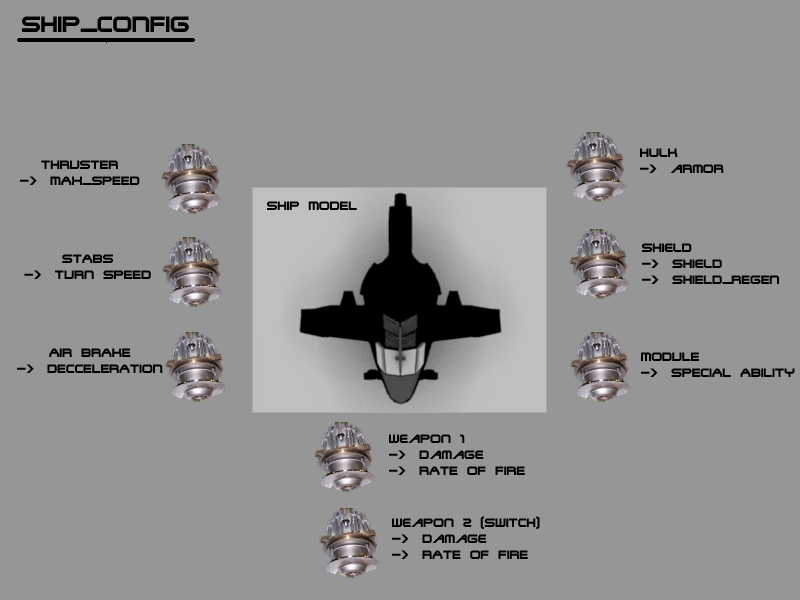
<style>
.page{position:relative;width:800px;height:600px;background:#969696}
.page>*{position:absolute;margin:0}
.t1{font:24px "TerminatorTwo";color:#000000}
.t2{font:13.3px "TerminatorTwo";color:#000000}
</style>
<div class="page">
<p class="t1" style="left:22px;top:16px;width:167px;height:16px">SHIP_CONFIG</p>
<p class="t2" style="left:640px;top:148px;width:84px;height:25px">hulk<br>-&gt; armor</p>
<p class="t2" style="left:20px;top:160px;width:120px;height:25px;text-align:center">THRUSTER<br>-&gt; MAX_SPEED</p>
<p class="t2" style="left:267px;top:201px;width:90px;height:9px">SHIP MODEL</p>
<p class="t2" style="left:642px;top:243px;width:137px;height:41px">shield<br>-&gt; shield<br>-&gt; SHIELD_REGEN</p>
<p class="t2" style="left:24px;top:254px;width:127px;height:25px;text-align:center">STABS<br>-&gt; TURN SPEED</p>
<p class="t2" style="left:17px;top:348px;width:146px;height:25px;text-align:center">AIR BRAKE<br>-&gt; DECCELERATION</p>
<p class="t2" style="left:641px;top:352px;width:154px;height:25px">MODULE<br>-&gt; SPECIAL ABILITY</p>
<p class="t2" style="left:389px;top:434px;width:136px;height:41px">Weapon 1<br>-&gt; Damage<br>-&gt; RATE OF FIRE</p>
<p class="t2" style="left:392px;top:516px;width:148px;height:43px">Weapon 2 (SWITCH)<br>-&gt; Damage<br>-&gt; RATE OF FIRE</p>
</div>
